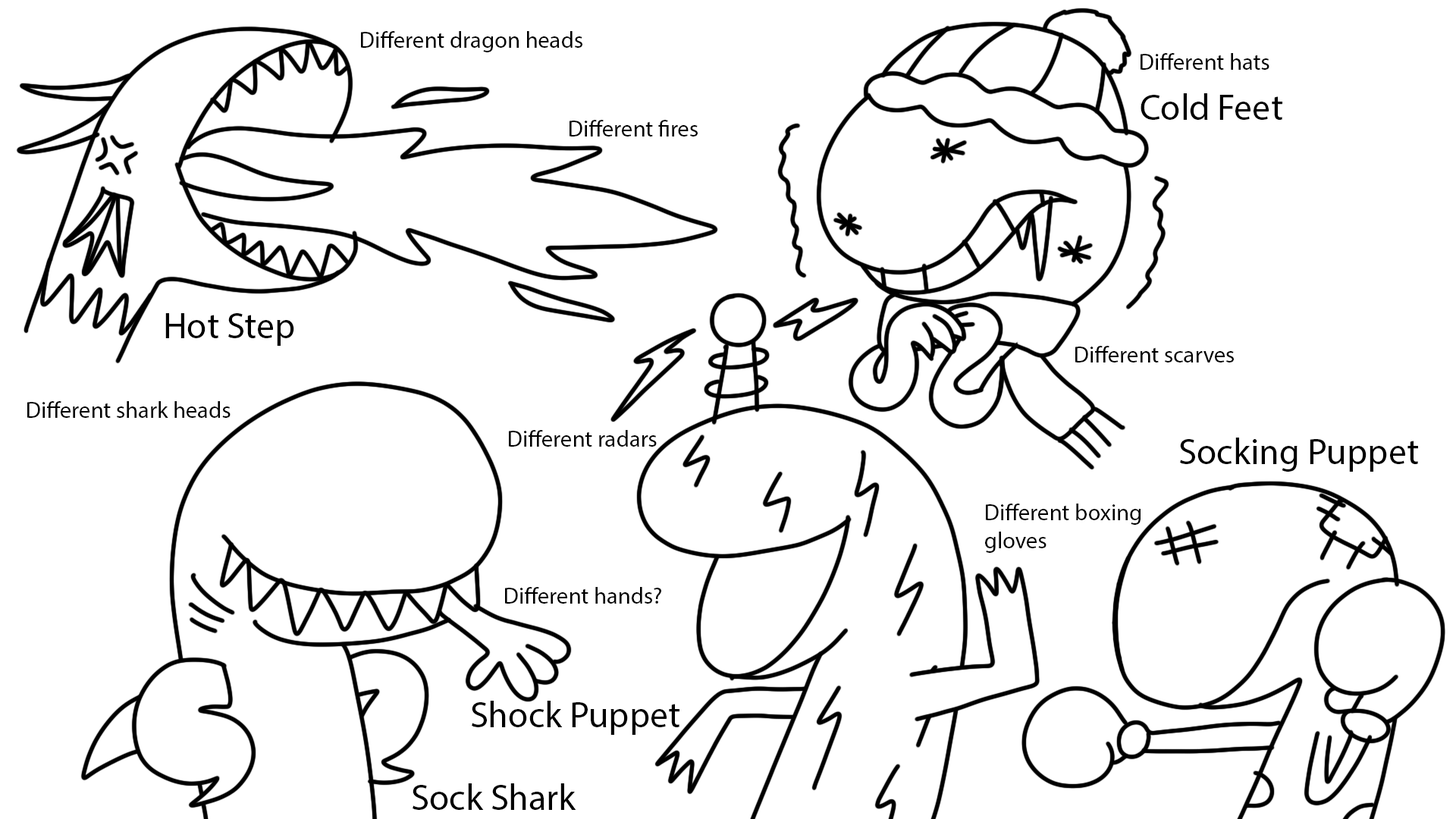
<style>
.page{position:relative;width:1456px;height:819px;background:#ffffff}
.page>*{position:absolute;margin:0}
.t1{font:23.3px "MyriadPro-Regular";color:#000000}
.t2{font:36.5px "MyriadPro-Regular";color:#000000}
</style>
<div class="page">
<p class="t1" style="left:361px;top:31px;width:221px;height:21px">Different dragon heads</p>
<p class="t1" style="left:1141px;top:53px;width:128px;height:17px">Different hats</p>
<p class="t2" style="left:1141px;top:93px;width:141px;height:27px">Cold Feet</p>
<p class="t1" style="left:570px;top:120px;width:128px;height:16px">Different fires</p>
<p class="t2" style="left:165px;top:313px;width:129px;height:33px">Hot Step</p>
<p class="t1" style="left:1075px;top:346px;width:159px;height:16px">Different scarves</p>
<p class="t1" style="left:27px;top:401px;width:204px;height:17px">Different shark heads</p>
<p class="t1" style="left:509px;top:430px;width:148px;height:17px">Different radars</p>
<p class="t2" style="left:1180px;top:438px;width:238px;height:34px">Socking Puppet</p>
<p class="t1" style="left:985px;top:504px;width:156px;height:49px">Different boxing<br>gloves</p>
<p class="t1" style="left:505px;top:587px;width:156px;height:17px">Different hands?</p>
<p class="t2" style="left:472px;top:701px;width:207px;height:34px">Shock Puppet</p>
<p class="t2" style="left:413px;top:783px;width:163px;height:27px">Sock Shark</p>
</div>
